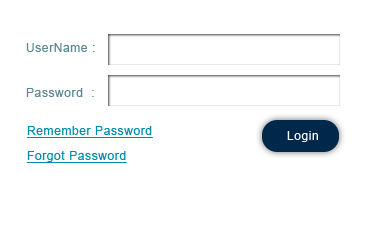
<style>
.page{position:relative;width:384px;height:243px;background:#ffffff}
.page>*{position:absolute;margin:0}
.t1{font:12px "ArialMT";letter-spacing:0.05em;color:#5a8992}
.t2{font:12px "ArialMT";letter-spacing:0.05em;color:#018ca8;text-decoration:underline}
.t3{font:12px "ArialMT";letter-spacing:0.05em;color:#ffffff}
</style>
<div class="page">
<p class="t1" style="left:26px;top:43px;width:69px;height:9px">UserName :</p>
<p class="t1" style="left:26px;top:88px;width:68px;height:9px">Password  :</p>
<p class="t2" style="left:27px;top:126px;width:126px;height:12px">Remember Password</p>
<p class="t3" style="left:287px;top:131px;width:31px;height:11px">Login</p>
<p class="t2" style="left:27px;top:151px;width:100px;height:12px">Forgot Password</p>
</div>
